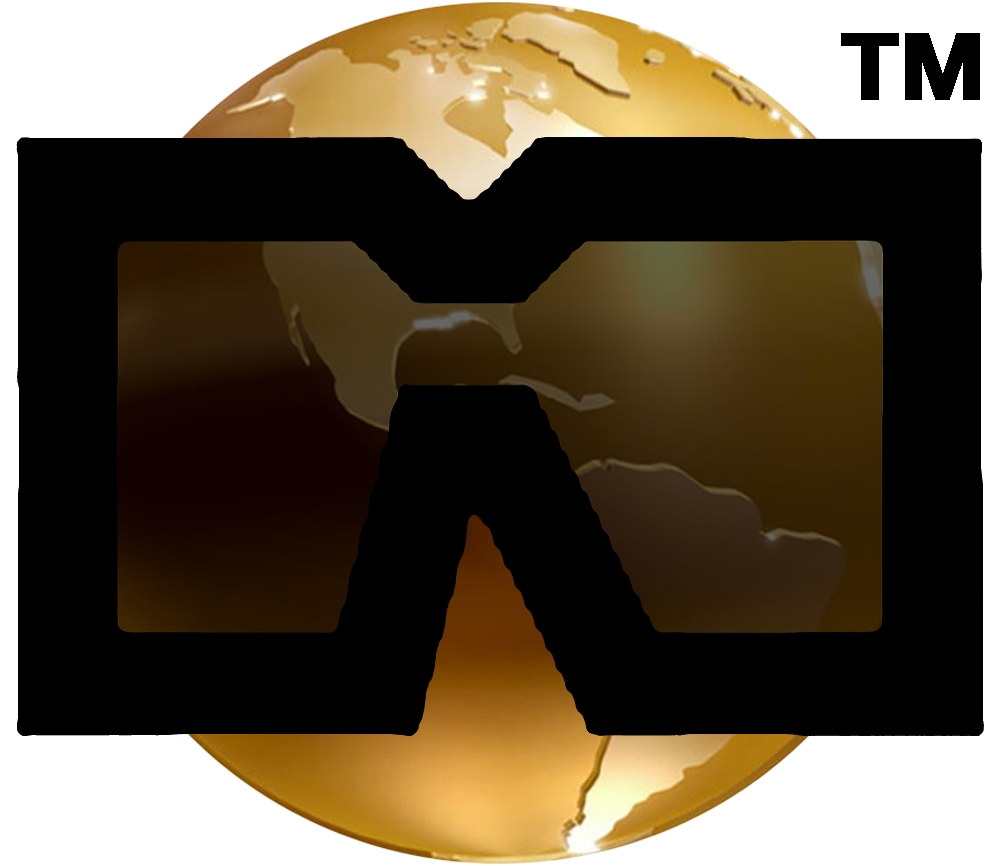
<style>
.page{position:relative;width:1000px;height:866px;background:#000000}
.page>*{position:absolute;margin:0}
.t1{font:92.7px "HelveticaNeue-Bold";color:#000000;font-weight:bold}
</style>
<div class="page">
<p class="t1" style="left:841px;top:33px;width:139px;height:67px">TM</p>
</div>
